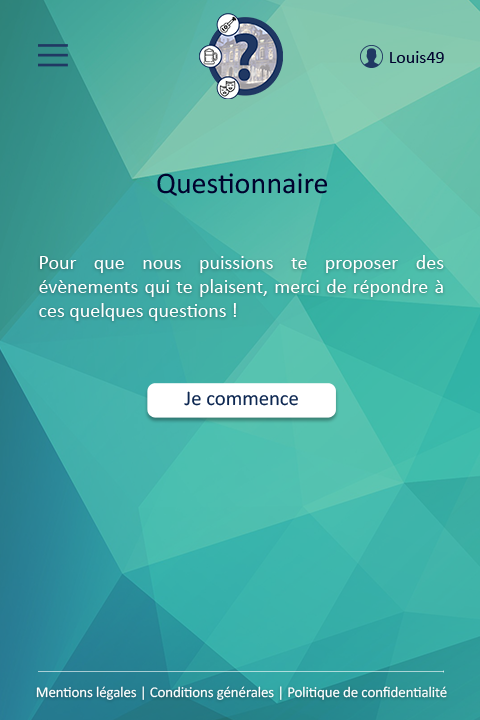
<style>
.page{position:relative;width:480px;height:720px}
.page>*{position:absolute;margin:0}
.t1{font:18px "Calibri";color:#00022e}
.t2{font:30px "Calibri";color:#00022e}
.t3{font:20px "Calibri";color:#ffffff}
.t4{font:20.7px "Calibri";color:#0d2751}
.t5{font:15px "Calibri";letter-spacing:-0.01em;color:#ffffff}
</style>
<div class="page">
<p class="t1" style="left:390px;top:51px;width:54px;height:12px">Louis49</p>
<p class="t2" style="left:157px;top:173px;width:170px;height:23px">Questionnaire</p>
<p class="t3" style="left:39px;top:255px;width:405px;height:66px;text-align:justify">Pour que nous puissions te proposer des évènements qui te plaisent, merci de répondre à ces quelques questions !</p>
<p class="t4" style="left:184px;top:391px;width:114px;height:15px">Je commence</p>
<p class="t5" style="left:36px;top:686px;width:411px;height:14px">Mentions légales | Conditions générales | Politique de confidentialité</p>
</div>
